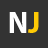
<style>
.page{position:relative;width:48px;height:48px;background:#333333}
.page>*{position:absolute;margin:0}
.t1{font:30.1px "MyriadPro-Bold";color:#ffffff}
.t2{font:30.1px "MyriadPro-Bold";color:#ffca05}
</style>
<div class="page">
<p class="t1" style="left:9px;top:12px;width:30px;height:21px">N<span class="t2">J</span></p>
</div>
